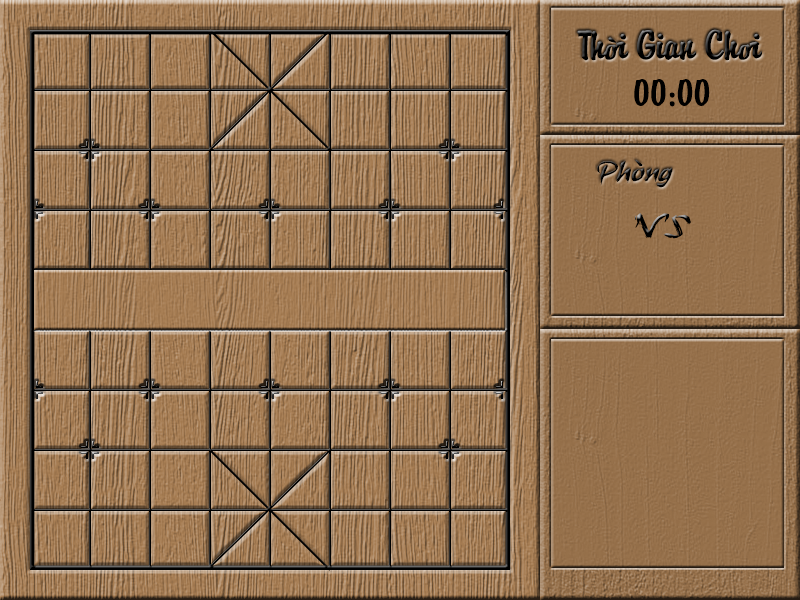
<style>
.page{position:relative;width:800px;height:600px}
.page>*{position:absolute;margin:0}
.t1{font:36px "VNI-BriquetNormal";color:#000000}
.t2{font:36px "UVNBuiDoi";color:#000000}
.t3{font:30px "UVNButLong1";color:#000000}
.t4{font:36px "UVNButLong1";color:#000000}
</style>
<div class="page">
<p class="t1" style="left:577px;top:29px;width:185px;height:32px">Th<span class="t2">ờ</span>i Gian Ch<span class="t2">ơ</span>i</p>
<p class="t1" style="left:634px;top:79px;width:76px;height:28px">00:00</p>
<p class="t3" style="left:597px;top:159px;width:76px;height:29px">Phòng</p>
<p class="t4" style="left:635px;top:213px;width:56px;height:26px">VS</p>
</div>
